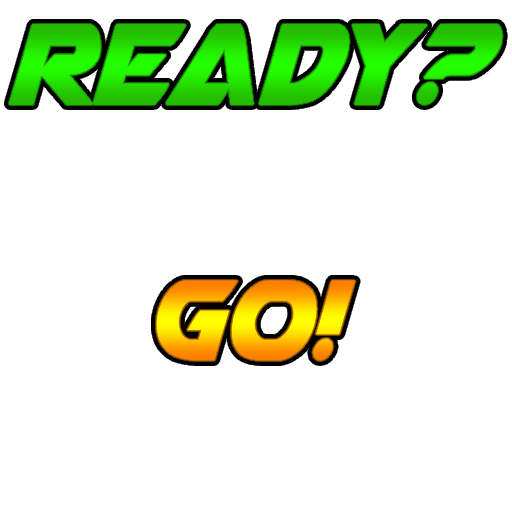
<style>
.page{position:relative;width:512px;height:512px;background:#ffffff}
.page>*{position:absolute;margin:0}
.t1{font:150px "AirstrikeCondensed"}
</style>
<div class="page">
<p class="t1" style="left:9px;top:24px;width:493px;height:80px">Ready?</p>
<p class="t1" style="left:156px;top:280px;width:199px;height:80px">GO!</p>
</div>
